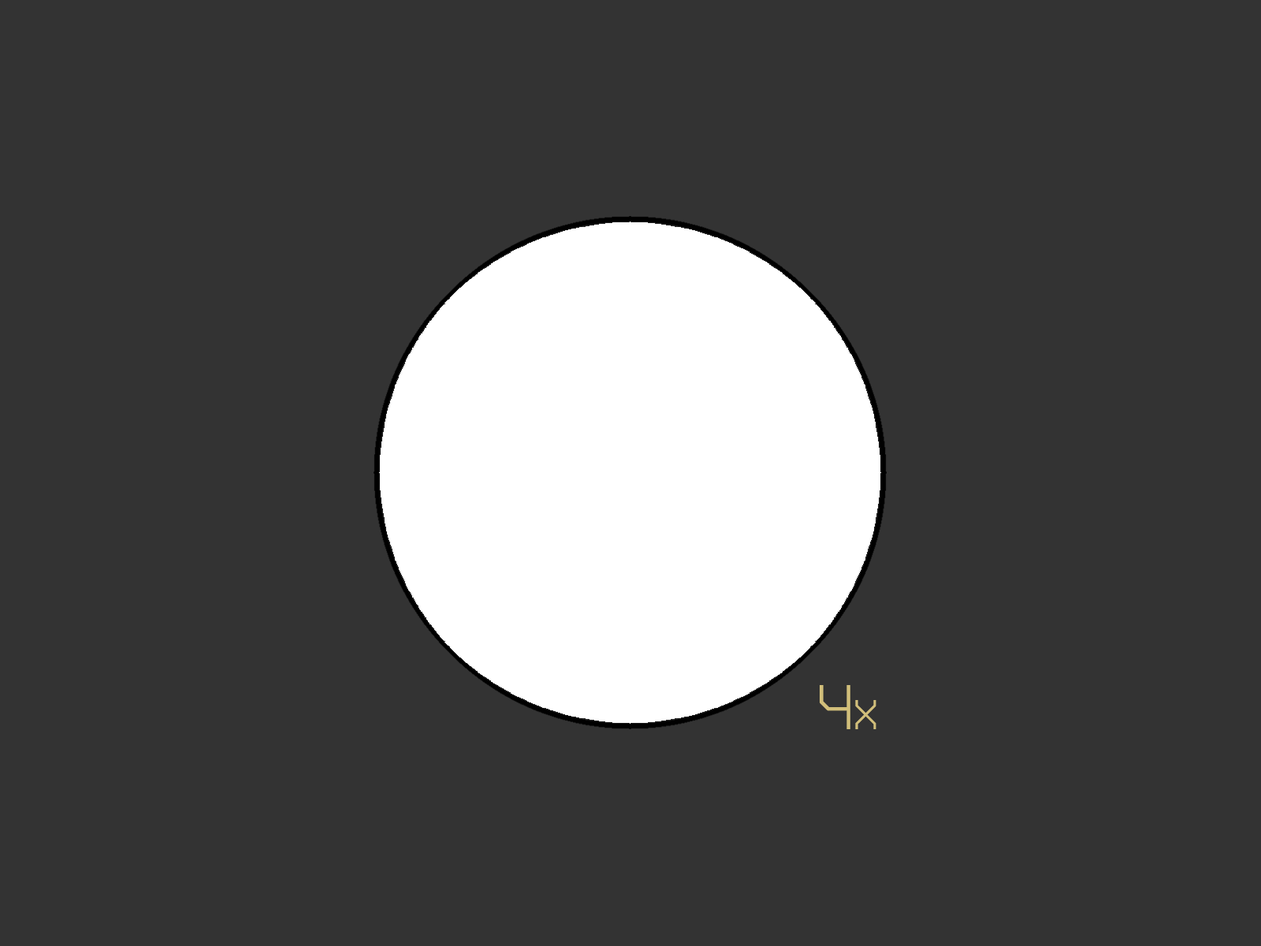
<style>
.page{position:relative;width:1261px;height:946px;background:#333333}
.page>*{position:absolute;margin:0}
.t1{font:63px "Arame-Thin";color:#d2bf7a}
.t2{font:41.8px "Arame-Thin";color:#d2bf7a}
</style>
<div class="page">
<p class="t1" style="left:820px;top:685px;width:56px;height:44px">4<span class="t2">x</span></p>
</div>
